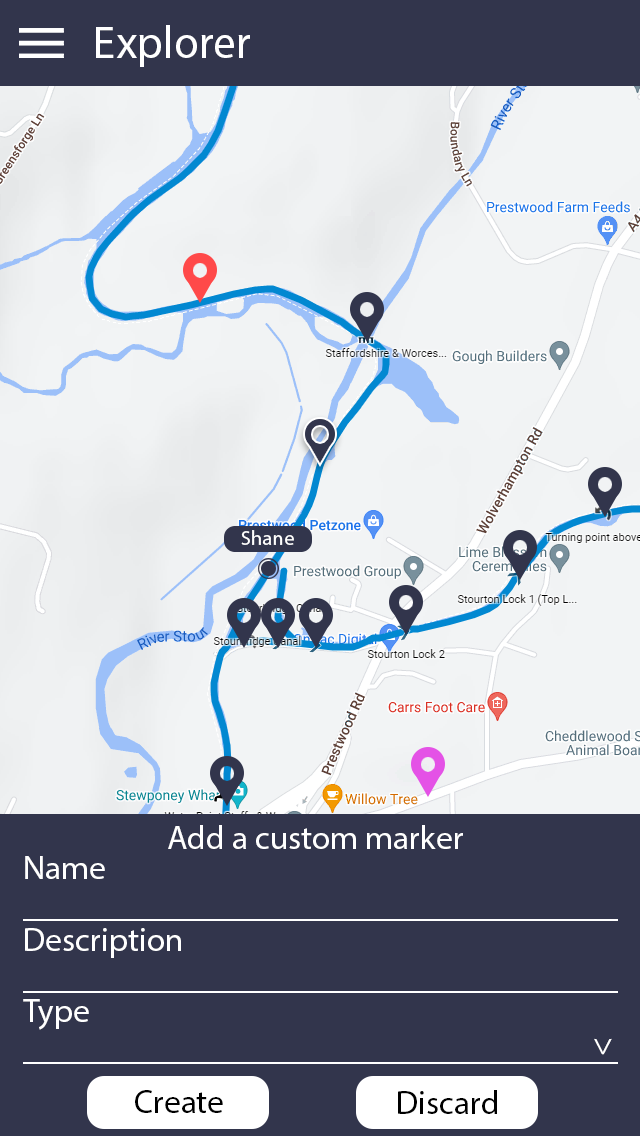
<style>
.page{position:relative;width:640px;height:1136px;background:#32354c}
.page>*{position:absolute;margin:0}
.t1{font:45.8px "MyriadPro-Regular";color:#ffffff}
.t2{font:20.8px "MyriadPro-Regular";color:#ffffff}
.t3{font:33.3px "MyriadPro-Regular";color:#ffffff}
.t4{font:33.3px "MyriadPro-Regular";color:#000000}
</style>
<div class="page">
<p class="t1" style="left:96px;top:25px;width:154px;height:42px">Explorer</p>
<p class="t2" style="left:241px;top:530px;width:53px;height:15px">Shane</p>
<p class="t3" style="left:168px;top:825px;width:295px;height:24px">Add a custom marker</p>
<p class="t3" style="left:25px;top:856px;width:80px;height:23px">Name</p>
<p class="t3" style="left:25px;top:928px;width:156px;height:30px">Description</p>
<p class="t3" style="left:23px;top:999px;width:66px;height:31px">Type</p>
<p class="t3" style="left:594px;top:1038px;width:18px;height:17px;rotate:90deg">&gt;</p>
<p class="t4" style="left:135px;top:1090px;width:88px;height:23px">Create</p>
<p class="t4" style="left:398px;top:1090px;width:99px;height:24px">Discard</p>
</div>
